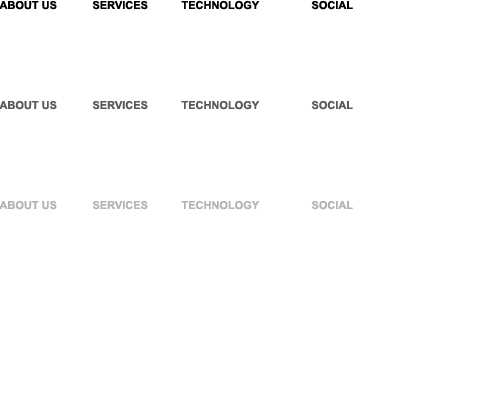
<style>
.page{position:relative;width:500px;height:400px;background:#ffffff}
.page>*{position:absolute;margin:0}
.t1{font:11px "Arial-BoldMT";color:#000000}
.t2{font:11px "Arial-BoldMT";color:#5a5a5a}
.t3{font:11px "Arial-BoldMT";color:#b4b4b4}
</style>
<div class="page">
<p class="t1" style="left:0px;top:0px;width:57px;height:10px">ABOUT US</p>
<p class="t1" style="left:92px;top:0px;width:56px;height:10px">SERVICES</p>
<p class="t1" style="left:181px;top:0px;width:79px;height:10px">TECHNOLOGY</p>
<p class="t1" style="left:311px;top:0px;width:42px;height:10px">SOCIAL</p>
<p class="t2" style="left:0px;top:100px;width:57px;height:10px">ABOUT US</p>
<p class="t2" style="left:92px;top:100px;width:56px;height:10px">SERVICES</p>
<p class="t2" style="left:181px;top:100px;width:79px;height:10px">TECHNOLOGY</p>
<p class="t2" style="left:311px;top:100px;width:42px;height:10px">SOCIAL</p>
<p class="t3" style="left:0px;top:200px;width:57px;height:10px">ABOUT US</p>
<p class="t3" style="left:92px;top:200px;width:56px;height:10px">SERVICES</p>
<p class="t3" style="left:181px;top:200px;width:79px;height:10px">TECHNOLOGY</p>
<p class="t3" style="left:311px;top:200px;width:42px;height:10px">SOCIAL</p>
</div>
